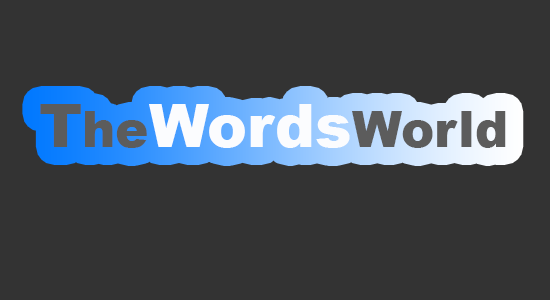
<style>
.page{position:relative;width:550px;height:300px;background:#333333}
.page>*{position:absolute;margin:0}
.t1{font:60px "Arial-Black";color:#fbfcfe}
.t2{font:60px "Arial-Black";color:#5c5c5c}
.t3{font:50px "Arial-Black";color:#5c5c5c}
</style>
<div class="page">
<p class="t1" style="left:40px;top:104px;width:466px;height:44px"><span class="t2">T</span><span class="t3">he</span>Words<span class="t3">World</span></p>
</div>
